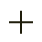
<style>
.page{position:relative;width:42px;height:42px;background:#ffffff}
.page>*{position:absolute;margin:0}
.t1{font:55px "KhmerMN";letter-spacing:0.12em;color:#1f1d0b}
</style>
<div class="page">
<p class="t1" style="left:9px;top:10px;width:24px;height:24px">+</p>
</div>
